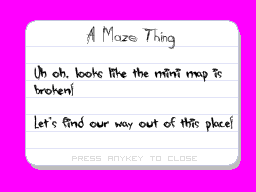
<style>
.page{position:relative;width:256px;height:192px;background:#ffffff}
.page>*{position:absolute;margin:0}
.t1{font:18px "Daubed";color:#010101}
.t2{font:14px "alienstrawberry";color:#000000}
.t3{font:12px "VisitorTT2BRK";color:#dddddd}
</style>
<div class="page">
<p class="t1" style="left:86px;top:26px;width:89px;height:23px">A Maze Thing</p>
<p class="t2" style="left:33px;top:65px;width:200px;height:67px">Uh oh, looks like the mini map is <br>broken!<br><br>Let’s find our way out of this place!</p>
<p class="t3" style="left:72px;top:156px;width:125px;height:5px">Press anykey to close</p>
</div>
